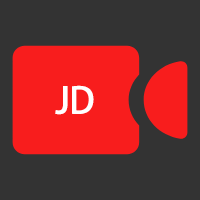
<style>
.page{position:relative;width:200px;height:200px;background:#333333}
.page>*{position:absolute;margin:0}
.t1{font:36px "AdobeHeitiStd-Regular";letter-spacing:-0.02em;color:#ffffff}
</style>
<div class="page">
<p class="t1" style="left:55px;top:85px;width:39px;height:30px">JD</p>
</div>
